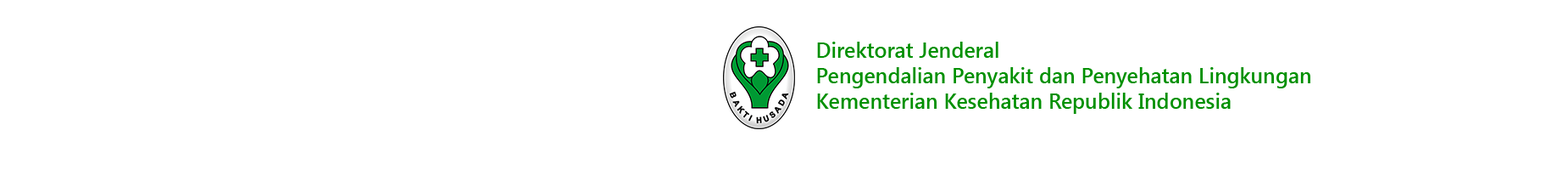
<style>
.page{position:relative;width:1568px;height:170px;background:#ffffff}
.page>*{position:absolute;margin:0}
.t1{font:21.2px "SegoeUI-SemiBold";color:#009000}
</style>
<div class="page">
<p class="t1" style="left:817px;top:42px;width:493px;height:72px">Direktorat Jenderal<br>Pengendalian Penyakit dan Penyehatan Lingkungan<br>Kementerian Kesehatan Republik Indonesia</p>
</div>
